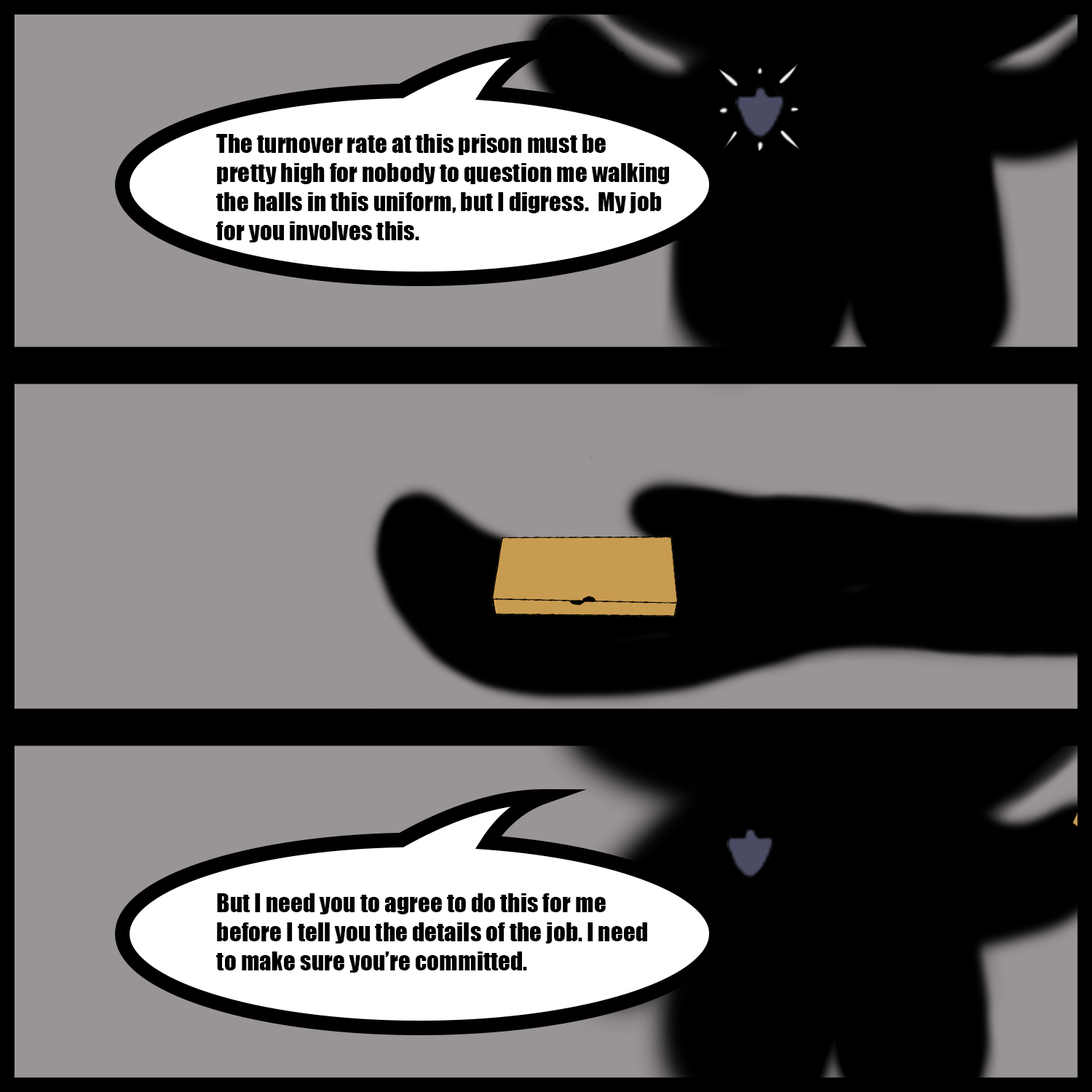
<style>
.page{position:relative;width:1092px;height:1092px;background:#000000}
.page>*{position:absolute;margin:0}
.t1{font:24.3px "Impact";color:#000000}
</style>
<div class="page">
<p class="t1" style="left:216px;top:134px;width:453px;height:108px">The turnover rate at this prison must be <br>pretty high for nobody to question me walking <br>the halls in this uniform, but I digress.  My job<br>for you involves this.</p>
<p class="t1" style="left:216px;top:893px;width:431px;height:80px">But I need you to agree to do this for me<br>before I tell you the details of the job. I need<br>to make sure you’re committed.</p>
</div>
